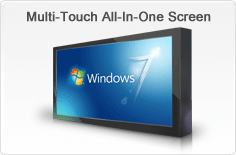
<style>
.page{position:relative;width:236px;height:155px}
.page>*{position:absolute;margin:0}
.t1{font:13px "ArialMT";color:#4e4e4e;font-weight:bold}
</style>
<div class="page">
<p class="t1" style="left:27px;top:11px;width:184px;height:11px">Multi-Touch All-In-One Screen</p>
</div>
